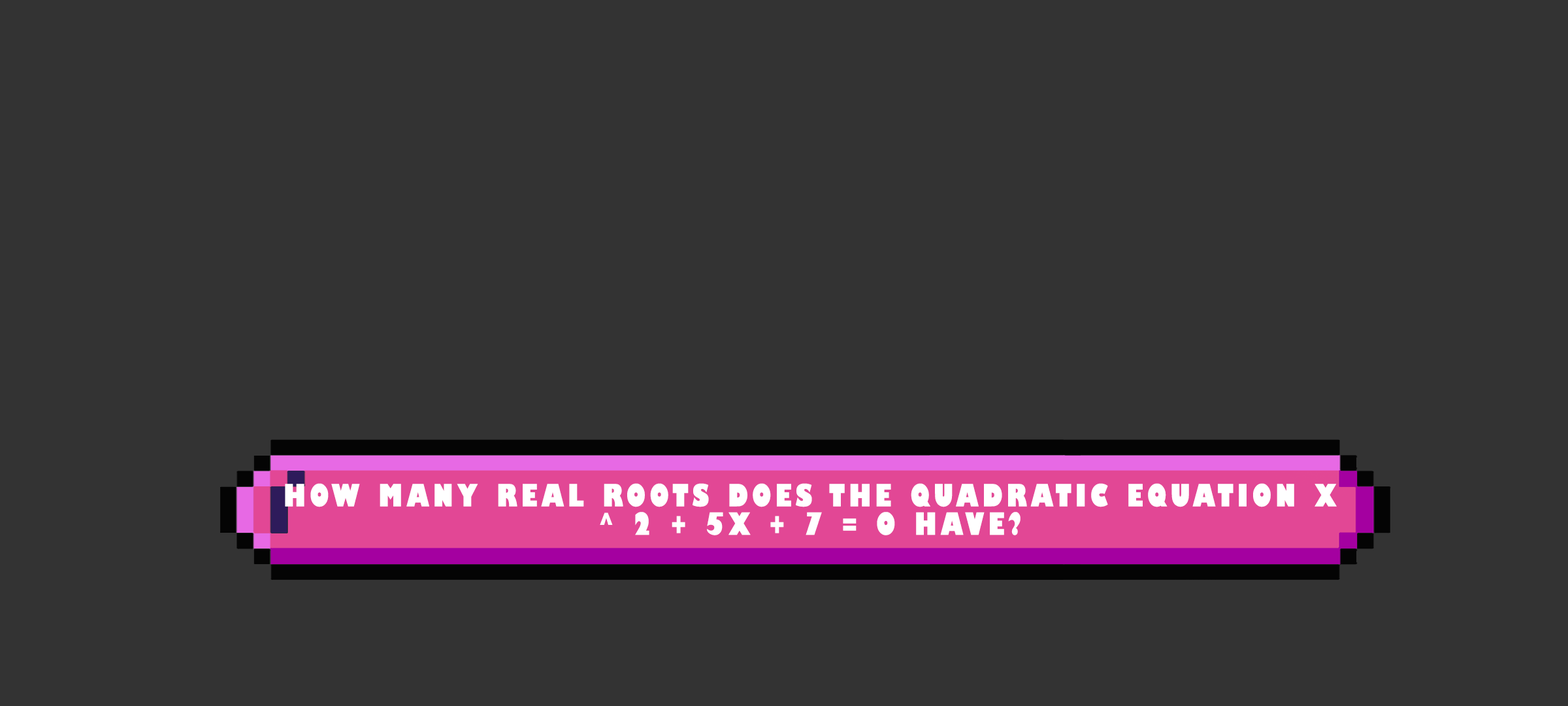
<style>
.page{position:relative;width:1568px;height:706px;background:#333333}
.page>*{position:absolute;margin:0}
.t1{font:30px/28.4px "GillSans-UltraBoldCondensed";letter-spacing:0.115em;color:#ffffff;text-transform:uppercase;scale:1.12 1}
</style>
<div class="page">
<p class="t1" style="left:285px;top:483px;width:1052px;height:52px;text-align:center">How many real roots does the quadratic equation x ^ 2 + 5x + 7 = 0 have?</p>
</div>
